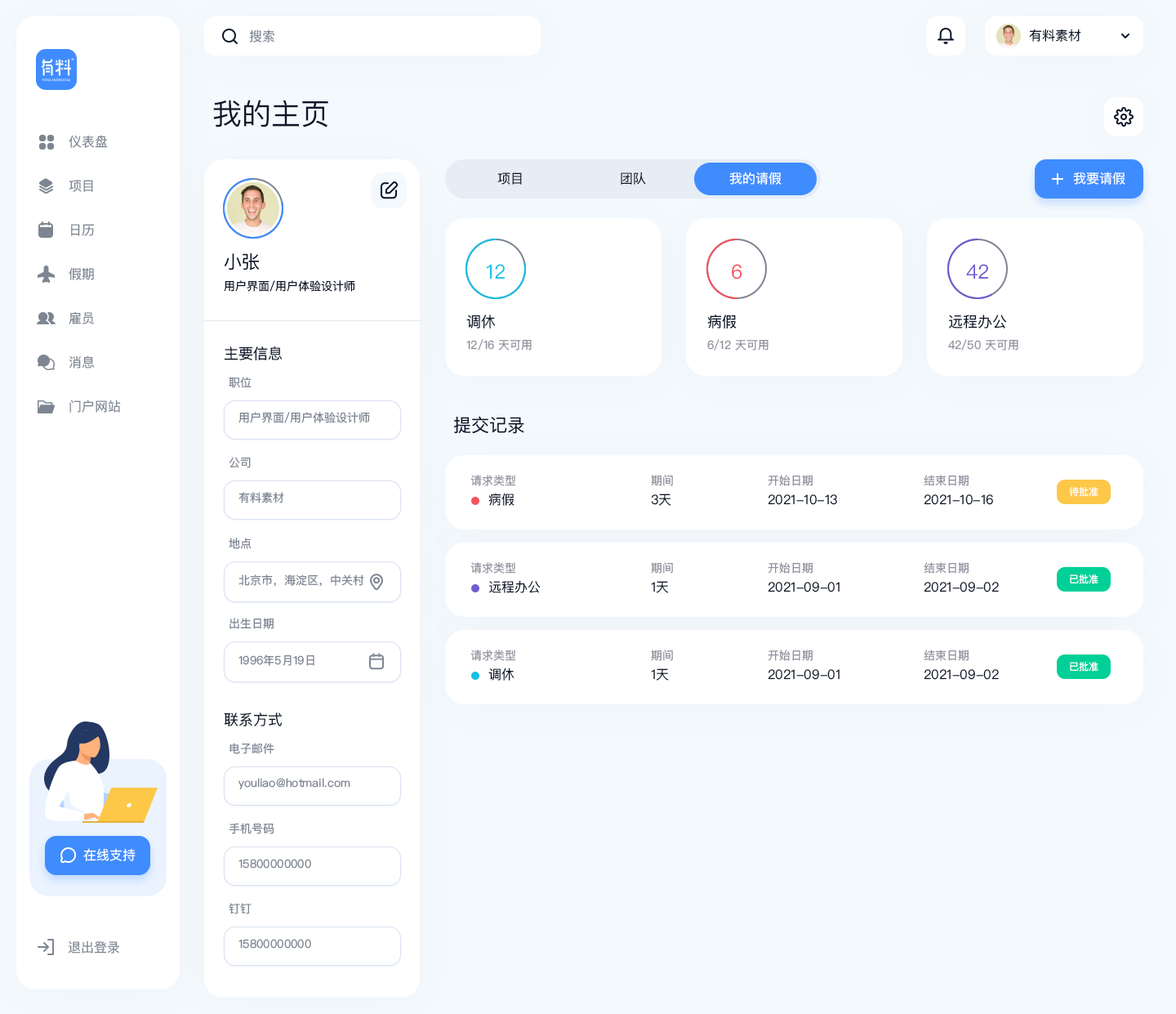
<style>
.page{position:relative;width:1176px;height:1014px;background:#ffffff}
.page>*{position:absolute;margin:0}
.t1{font:13.1px "PingFangSC-Regular";color:#7d8592}
.t2{font:13.1px "PingFangSC-Regular";color:#0a1629}
.t3{font:29.4px "PingFangSC-Regular";color:#0a1629}
.t4{font:13.1px "PingFangSC-Regular";color:#ffffff}
.t5{font:18px "PingFangSC-Regular";color:#0a1629}
.t6{font:19.6px "PingFangSC-Regular";color:#15c0e6}
.t7{font:19.6px "PingFangSC-Regular";color:#f65160}
.t8{font:19.6px "PingFangSC-Regular";color:#6d5dd3}
.t9{font:11.4px "PingFangSC-Regular";color:#0a1629}
.t10{font:14.7px "PingFangSC-Regular";color:#0a1629}
.t11{font:11.4px "PingFangSC-Regular";color:#91929e}
.t12{font:11.4px "PingFangSC-Regular";color:#7d8592}
.t13{font:9.8px "PingFangSC-Regular";color:#ffffff}
</style>
<div class="page">
<p class="t1" style="left:249px;top:29px;width:25px;height:13px">搜索</p>
<p class="t2" style="left:1029px;top:29px;width:53px;height:13px">有料素材</p>
<p class="t3" style="left:213px;top:100px;width:115px;height:27px">我的主页</p>
<p class="t1" style="left:69px;top:135px;width:39px;height:13px">仪表盘</p>
<p class="t2" style="left:497px;top:172px;width:25px;height:13px">项目</p>
<p class="t2" style="left:621px;top:172px;width:25px;height:13px">团队</p>
<p class="t4" style="left:729px;top:172px;width:53px;height:13px">我的请假</p>
<p class="t4" style="left:1073px;top:172px;width:53px;height:13px">我要请假</p>
<p class="t1" style="left:69px;top:180px;width:24px;height:12px">项目</p>
<p class="t1" style="left:71px;top:224px;width:23px;height:12px">日历</p>
<p class="t5" style="left:224px;top:252px;width:36px;height:18px">小张</p>
<p class="t1" style="left:69px;top:267px;width:25px;height:13px">假期</p>
<p class="t6" style="left:487px;top:264px;width:18px;height:15px">12</p>
<p class="t7" style="left:732px;top:264px;width:11px;height:15px">6</p>
<p class="t8" style="left:966px;top:264px;width:22px;height:15px">42</p>
<p class="t9" style="left:224px;top:280px;width:131px;height:12px">用户界面/用户体验设计师</p>
<p class="t1" style="left:69px;top:311px;width:25px;height:13px">雇员</p>
<p class="t10" style="left:466px;top:314px;width:30px;height:14px">调休</p>
<p class="t10" style="left:707px;top:314px;width:30px;height:14px">病假</p>
<p class="t10" style="left:949px;top:314px;width:58px;height:14px">远程办公</p>
<p class="t11" style="left:466px;top:339px;width:66px;height:11px">12/16 天可用</p>
<p class="t11" style="left:707px;top:339px;width:62px;height:11px">6/12 天可用</p>
<p class="t11" style="left:948px;top:339px;width:71px;height:11px">42/50 天可用</p>
<p class="t10" style="left:224px;top:346px;width:59px;height:14px">主要信息</p>
<p class="t1" style="left:69px;top:355px;width:26px;height:13px">消息</p>
<p class="t12" style="left:229px;top:377px;width:23px;height:11px">职位</p>
<p class="t1" style="left:69px;top:399px;width:52px;height:14px">门户网站</p>
<p class="t12" style="left:239px;top:412px;width:131px;height:11px">用户界面/用户体验设计师</p>
<p class="t5" style="left:453px;top:416px;width:71px;height:18px">提交记录</p>
<p class="t12" style="left:229px;top:457px;width:22px;height:11px">公司</p>
<p class="t11" style="left:471px;top:475px;width:45px;height:11px">请求类型</p>
<p class="t11" style="left:651px;top:475px;width:22px;height:11px">期间</p>
<p class="t11" style="left:768px;top:475px;width:45px;height:11px">开始日期</p>
<p class="t11" style="left:924px;top:475px;width:45px;height:11px">结束日期</p>
<p class="t12" style="left:239px;top:492px;width:45px;height:11px">有料素材</p>
<p class="t2" style="left:488px;top:493px;width:27px;height:13px">病假</p>
<p class="t2" style="left:651px;top:493px;width:20px;height:13px">3天</p>
<p class="t2" style="left:768px;top:494px;width:69px;height:11px">2021-10-13</p>
<p class="t2" style="left:924px;top:494px;width:69px;height:11px">2021-10-16</p>
<p class="t13" style="left:1069px;top:487px;width:30px;height:10px">待批准</p>
<p class="t12" style="left:229px;top:537px;width:23px;height:12px">地点</p>
<p class="t11" style="left:471px;top:562px;width:45px;height:11px">请求类型</p>
<p class="t11" style="left:651px;top:562px;width:22px;height:11px">期间</p>
<p class="t11" style="left:768px;top:562px;width:45px;height:11px">开始日期</p>
<p class="t11" style="left:924px;top:562px;width:45px;height:11px">结束日期</p>
<p class="t12" style="left:239px;top:574px;width:125px;height:13px">北京市，海淀区，中关村</p>
<p class="t2" style="left:488px;top:580px;width:53px;height:13px">远程办公</p>
<p class="t2" style="left:651px;top:581px;width:18px;height:12px">1天</p>
<p class="t2" style="left:768px;top:582px;width:72px;height:10px">2021-09-01</p>
<p class="t2" style="left:924px;top:582px;width:75px;height:10px">2021-09-02</p>
<p class="t13" style="left:1070px;top:574px;width:29px;height:10px">已批准</p>
<p class="t12" style="left:230px;top:618px;width:44px;height:11px">出生日期</p>
<p class="t11" style="left:471px;top:649px;width:45px;height:12px">请求类型</p>
<p class="t11" style="left:651px;top:649px;width:22px;height:12px">期间</p>
<p class="t11" style="left:768px;top:649px;width:45px;height:12px">开始日期</p>
<p class="t11" style="left:924px;top:649px;width:45px;height:12px">结束日期</p>
<p class="t12" style="left:239px;top:654px;width:75px;height:12px">1996年5月19日</p>
<p class="t13" style="left:1070px;top:662px;width:29px;height:9px">已批准</p>
<p class="t2" style="left:488px;top:667px;width:27px;height:13px">调休</p>
<p class="t2" style="left:651px;top:668px;width:18px;height:12px">1天</p>
<p class="t2" style="left:768px;top:669px;width:72px;height:11px">2021-09-01</p>
<p class="t2" style="left:924px;top:669px;width:75px;height:11px">2021-09-02</p>
<p class="t10" style="left:224px;top:712px;width:59px;height:14px">联系方式</p>
<p class="t12" style="left:230px;top:743px;width:44px;height:11px">电子邮件</p>
<p class="t12" style="left:239px;top:778px;width:111px;height:11px">youliao@hotmail.com</p>
<p class="t12" style="left:229px;top:823px;width:45px;height:11px">手机号码</p>
<p class="t4" style="left:83px;top:848px;width:53px;height:13px">在线支持</p>
<p class="t12" style="left:239px;top:859px;width:72px;height:9px">15800000000</p>
<p class="t12" style="left:229px;top:903px;width:23px;height:11px">钉钉</p>
<p class="t1" style="left:68px;top:940px;width:51px;height:13px">退出登录</p>
<p class="t12" style="left:239px;top:939px;width:72px;height:9px">15800000000</p>
</div>
